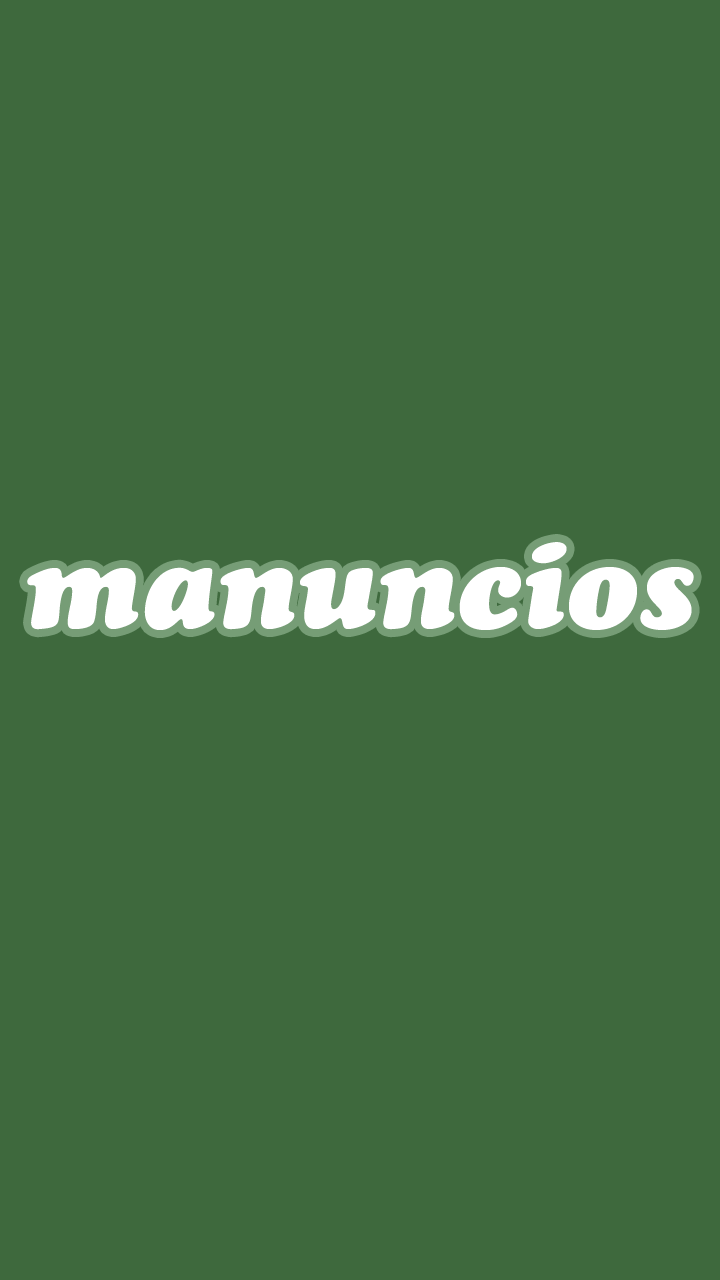
<style>
.page{position:relative;width:720px;height:1280px;background:#3e693d}
.page>*{position:absolute;margin:0}
.t1{font:119px "CooperBlackStd-Italic";color:#ffffff}
</style>
<div class="page">
<p class="t1" style="left:27px;top:542px;width:667px;height:88px">manuncios</p>
</div>
